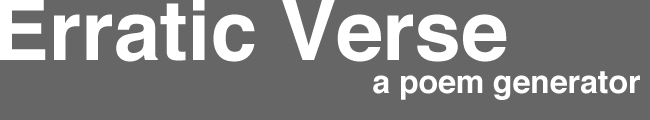
<style>
.page{position:relative;width:650px;height:120px;background:#666666}
.page>*{position:absolute;margin:0}
.t1{font:83.3px "Helvetica-Bold";color:#ffffff}
.t2{font:32px "Helvetica-Bold";color:#ffffff}
</style>
<div class="page">
<p class="t1" style="left:0px;top:0px;width:507px;height:62px">Erratic Verse</p>
<p class="t2" style="left:373px;top:71px;width:267px;height:29px">a poem generator</p>
</div>
